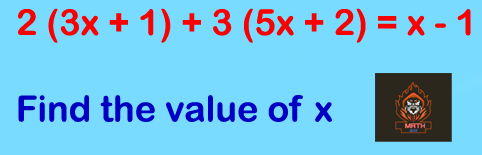
<style>
.page{position:relative;width:482px;height:155px;background:#78dbff}
.page>*{position:absolute;margin:0}
.t1{font:36px "ArialRoundedMTBold";color:#fa0000}
.t2{font:36px "ArialRoundedMTBold";color:#0000c3}
</style>
<div class="page">
<p class="t1" style="left:18px;top:8px;width:453px;height:114px">2 (3x + 1) + 3 (5x + 2) = x - 1<br><br><span class="t2">Find the value of x</span></p>
</div>
